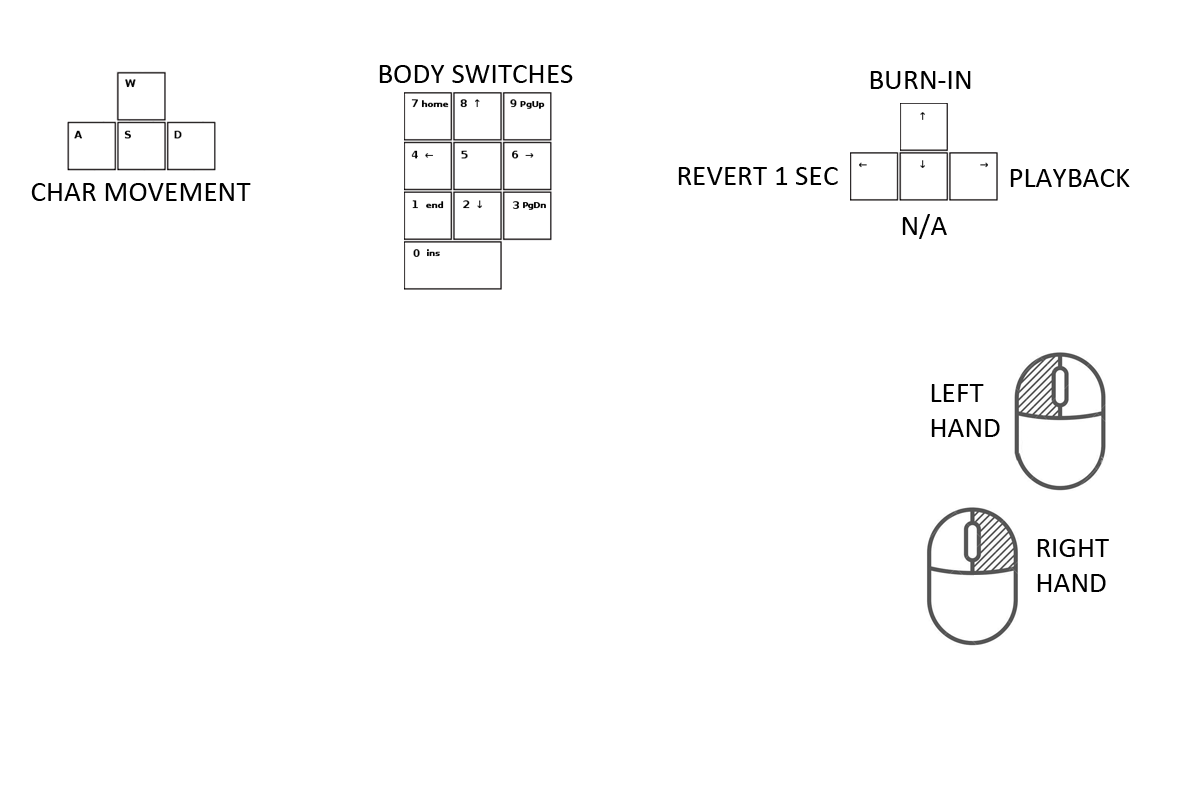
<style>
.page{position:relative;width:1200px;height:800px;background:#ffffff}
.page>*{position:absolute;margin:0}
.t1{font:29.2px "Calibri";color:#000000}
</style>
<div class="page">
<p class="t1" style="left:379px;top:65px;width:194px;height:18px">BODY SWITCHES</p>
<p class="t1" style="left:870px;top:71px;width:101px;height:18px">BURN-IN</p>
<p class="t1" style="left:678px;top:167px;width:160px;height:18px">REVERT 1 SEC</p>
<p class="t1" style="left:1010px;top:169px;width:120px;height:18px">PLAYBACK</p>
<p class="t1" style="left:31px;top:183px;width:220px;height:18px">CHAR MOVEMENT</p>
<p class="t1" style="left:902px;top:214px;width:45px;height:25px">N/A</p>
<p class="t1" style="left:931px;top:384px;width:69px;height:53px;text-align:justify">LEFT <br>HAND</p>
<p class="t1" style="left:1037px;top:539px;width:72px;height:53px;text-align:justify">RIGHT<br>HAND</p>
</div>
